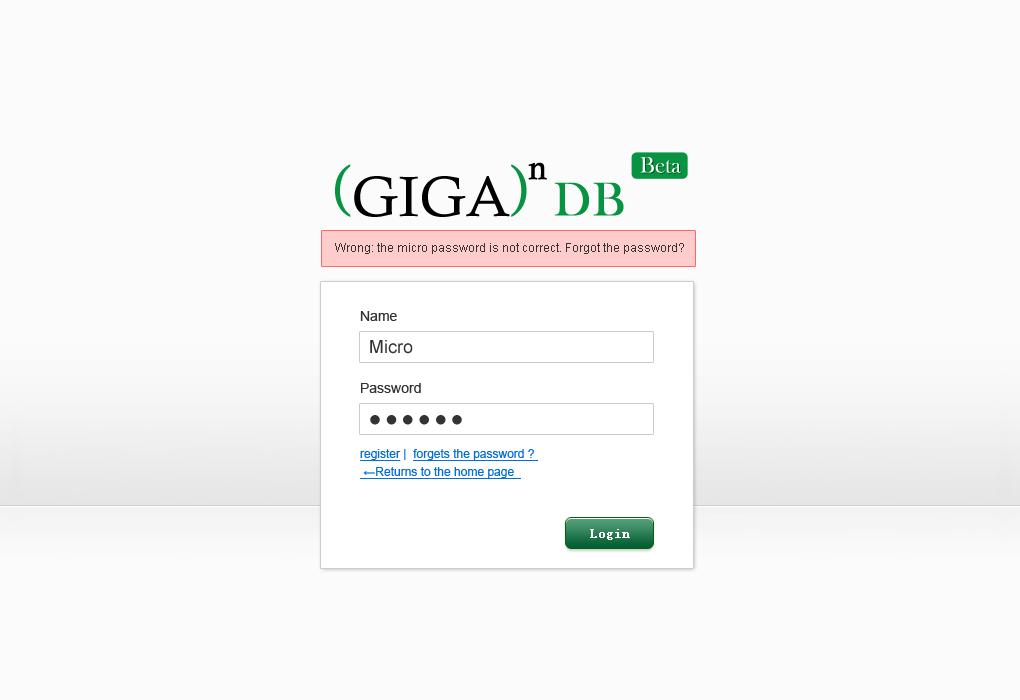
<style>
.page{position:relative;width:1020px;height:700px;background:#fbfbfb}
.page>*{position:absolute;margin:0}
.t1{font:22.7px "BaskOldFace";color:#ffffff}
.t2{font:57px "CalistoMT";color:#000000}
.t3{font:57px "CalistoMT";color:#089342}
.t4{font:57px "CalistoMT";color:#000000;font-weight:bold}
.t5{font:48.7px "BaskOldFace";color:#089342;font-weight:bold}
.t6{font:12px "ArialMT";color:#333333}
.t7{font:14px/72px "ArialMT";color:#333333}
.t8{font:18px "ArialMT";color:#333333}
.t9{font:72px "Avenir-Medium";letter-spacing:-0.05em;color:#333333}
.t10{font:12px/18px "ArialMT";color:#016eda;text-decoration:underline}
.t11{font:12px/18px "ArialMT";color:#016eda}
.t12{font:14px "SimSun";color:#fbfbfb;font-weight:bold}
</style>
<div class="page">
<p class="t1" style="left:640px;top:157px;width:41px;height:16px">Beta</p>
<p class="t2" style="left:335px;top:162px;width:212px;height:55px"><span class="t3">(</span>GIGA<span class="t3">)</span><span class="t4">n</span></p>
<p class="t5" style="left:554px;top:182px;width:70px;height:34px">DB</p>
<p class="t6" style="left:335px;top:243px;width:349px;height:11px">Wrong: the micro password is not correct. Forgot the password?</p>
<p class="t7" style="left:360px;top:311px;width:61px;height:82px">Name<br>Password</p>
<p class="t8" style="left:370px;top:340px;width:43px;height:14px">Micro</p>
<p class="t9" style="left:370px;top:415px;width:92px;height:10px">......</p>
<p class="t10" style="left:360px;top:449px;width:178px;height:30px">register<span class="t11"> |  </span>forgets the password ? <br> ←Returns to the home page</p>
<p class="t12" style="left:590px;top:529px;width:40px;height:11px">Login</p>
</div>
